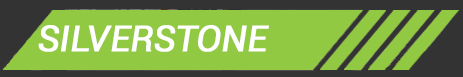
<style>
.page{position:relative;width:463px;height:77px;background:#92c942}
.page>*{position:absolute;margin:0}
.t1{font:36px "Roboto-Italic";letter-spacing:-0.02em;color:#ffffff;font-weight:bold}
</style>
<div class="page">
<p class="t1" style="left:38px;top:25px;width:231px;height:27px">SILVERSTONE</p>
</div>
